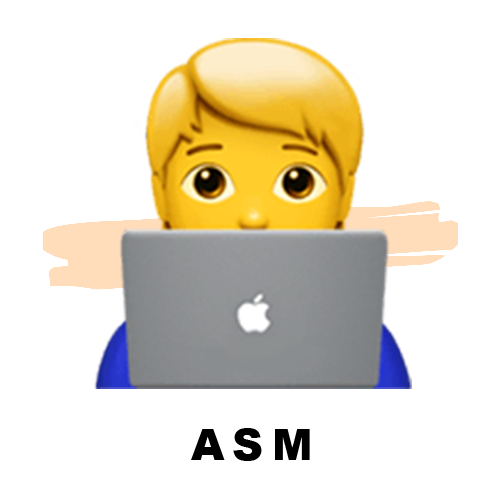
<style>
.page{position:relative;width:500px;height:500px;background:#ffffff}
.page>*{position:absolute;margin:0}
.t1{font:42.7px "Arial-Black";letter-spacing:0.2em;color:#000000}
</style>
<div class="page">
<p class="t1" style="left:191px;top:428px;width:119px;height:33px">ASM</p>
</div>
